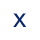
<style>
.page{position:relative;width:40px;height:40px;background:#ffffff}
.page>*{position:absolute;margin:0}
.t1{font:26px "HelveticaNeue";color:#0c2867}
</style>
<div class="page">
<p class="t1" style="left:13px;top:13px;width:14px;height:14px">x</p>
</div>
